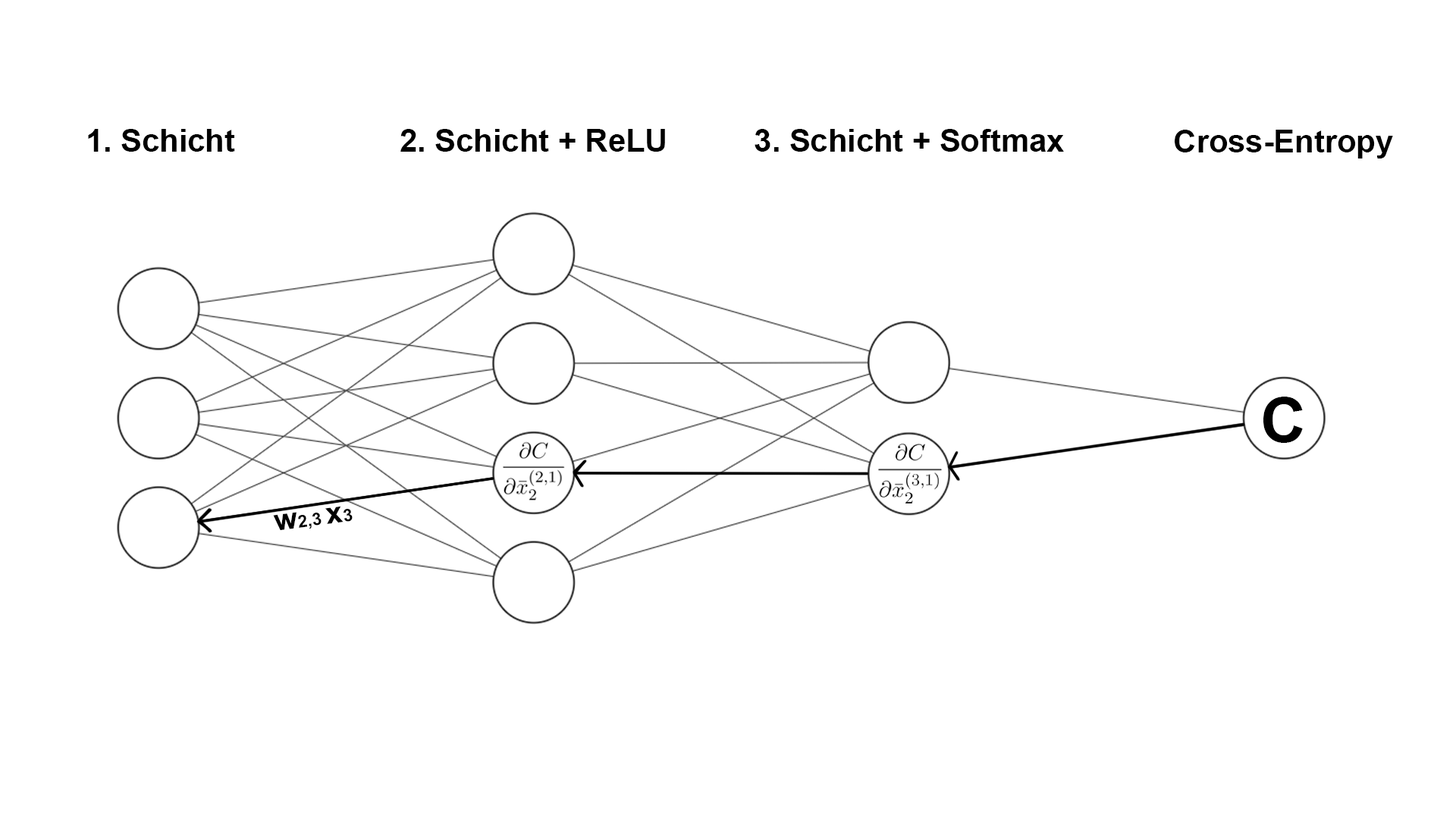
<style>
.page{position:relative;width:1456px;height:819px;background:#ffffff}
.page>*{position:absolute;margin:0}
.t1{font:31.6px "Arial-BoldMT";color:#000000}
.t2{font:63.2px "Arial-BoldMT";color:#000000}
.t3{font:17.3px "Arial-BoldMT";color:#000000}
.t4{font:30.2px "Arial-BoldMT";color:#000000}
</style>
<div class="page">
<p class="t1" style="left:88px;top:129px;width:147px;height:23px">1. Schicht</p>
<p class="t1" style="left:400px;top:129px;width:265px;height:23px">2. Schicht + ReLU</p>
<p class="t1" style="left:755px;top:129px;width:309px;height:23px">3. Schicht + Softmax</p>
<p class="t1" style="left:1175px;top:130px;width:218px;height:28px">Cross-Entropy</p>
<p class="t2" style="left:1263px;top:397px;width:40px;height:46px">C</p>
<p class="t3" style="left:273px;top:506px;width:80px;height:25px;rotate:-7deg"><span class="t4">w</span>2,3 <span class="t4">x</span>3</p>
</div>
